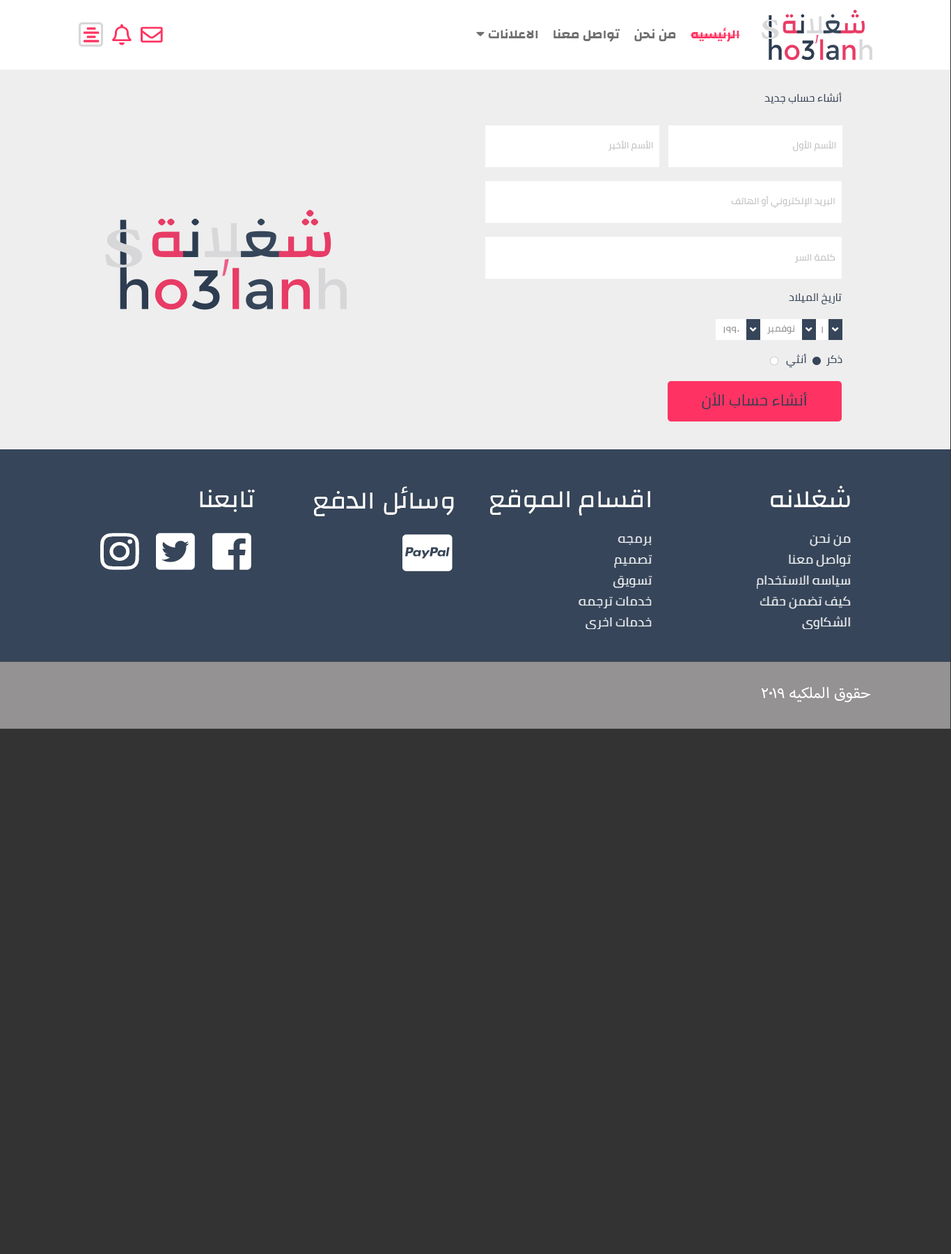
<style>
.page{position:relative;width:951px;height:1254px;background:#333333}
.page>*{position:absolute;margin:0}
.t1{font:10.4px "Cairo";color:#364559;text-transform:uppercase;scale:1.06 1}
.t2{font:9.1px "Cairo";color:#c3c2c2;text-transform:uppercase;scale:1.06 1}
.t3{font:9.1px "Cairo";color:#949292;text-transform:uppercase;scale:1.06 1}
.t4{font:9.1px "Cairo";color:#949292;scale:1.06 1}
.t5{font:15.3px "Cairo";color:#2d3c50;text-transform:uppercase;scale:1.06 1}
.t6{font:25.1px "Changa-Regular";color:#ffffff;text-transform:uppercase;scale:1.06 1}
.t7{font:12.5px/20.9px "Cairo-Regular";color:#ffffff;text-transform:uppercase;scale:1.06 1}
.t8{font:20.9px "MyriadArabic-Regular";color:#ffffff;text-transform:uppercase;scale:1.06 1}
</style>
<div class="page">
<p class="t1" style="left:765px;top:92px;width:77px;height:12px">أنشاء حساب جديد</p>
<p class="t2" style="left:608px;top:140px;width:45px;height:11px">الأسم الأخير</p>
<p class="t2" style="left:792px;top:140px;width:44px;height:11px">الأسم الأول</p>
<p class="t2" style="left:731px;top:196px;width:104px;height:12px">البريد الإلكتروني أو الهاتف</p>
<p class="t2" style="left:795px;top:253px;width:41px;height:10px">كلمة السر</p>
<p class="t1" style="left:789px;top:293px;width:53px;height:11px">تاريخ الميلاد</p>
<p class="t3" style="left:724px;top:327px;width:16px;height:6px">1990</p>
<p class="t3" style="left:767px;top:325px;width:28px;height:9px">نوفمبر</p>
<p class="t4" style="left:822px;top:327px;width:1px;height:6px">1</p>
<p class="t1" style="left:786px;top:353px;width:57px;height:15px">ذكر        أنثي</p>
<p class="t5" style="left:702px;top:391px;width:106px;height:18px">أنشاء حساب الأن</p>
<p class="t6" style="left:771px;top:485px;width:79px;height:22px">شغلانه</p>
<p class="t6" style="left:200px;top:489px;width:55px;height:23px">تابعنا</p>
<p class="t6" style="left:314px;top:486px;width:140px;height:31px">وسائل الدفع</p>
<p class="t6" style="left:490px;top:489px;width:160px;height:26px">اقسام الموقع</p>
<p class="t7" style="left:757px;top:533px;width:94px;height:96px">من نحن<br>تواصل معنا<br>سياسه الاستخدام <br>كيف تضمن حقك<br>الشكاوى</p>
<p class="t7" style="left:579px;top:536px;width:74px;height:93px">برمجه <br>تصميم<br>تسويق <br>خدمات ترجمه<br>خدمات اخرى</p>
<p class="t8" style="left:761px;top:687px;width:109px;height:15px">حقوق الملكيه 2019</p>
</div>
